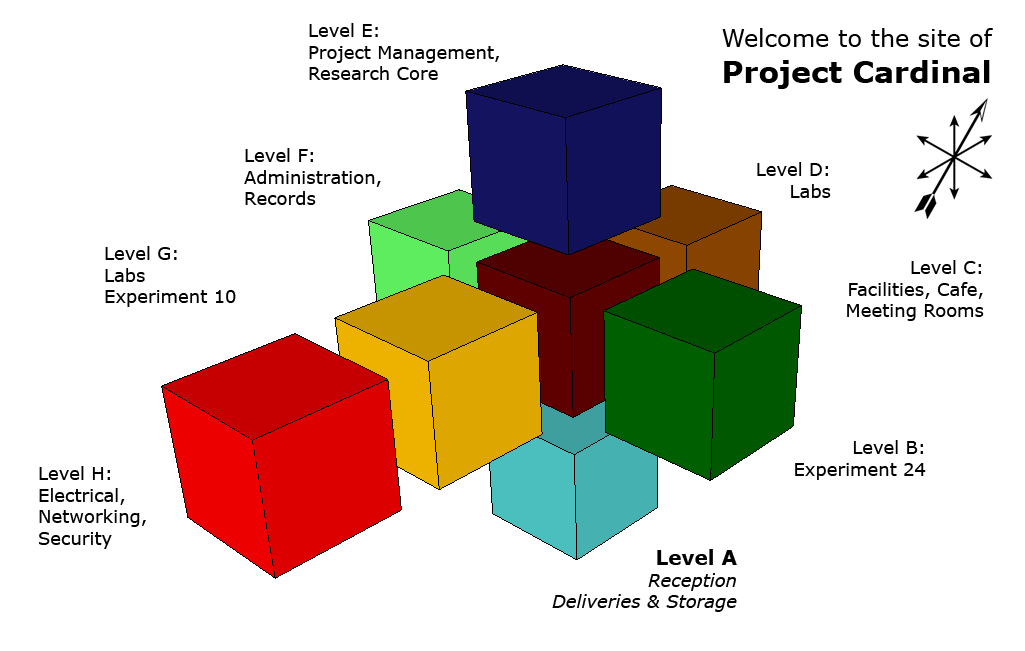
<style>
.page{position:relative;width:1025px;height:651px;background:#ffffff}
.page>*{position:absolute;margin:0}
.t1{font:18px "Verdana";color:#000000}
.t2{font:24px "Verdana";color:#000000}
.t3{font:30px "Verdana-Bold";color:#000000}
.t4{font:18px "Verdana-Italic";color:#000000}
.t5{font:20px "Verdana-Bold";color:#000000}
</style>
<div class="page">
<p class="t1" style="left:309px;top:23px;width:190px;height:57px">Level E:<br>Project Management,<br>Research Core</p>
<p class="t2" style="left:722px;top:28px;width:271px;height:61px;text-align:right">Welcome to the site of<br><span class="t3">Project Cardinal</span></p>
<p class="t1" style="left:244px;top:148px;width:137px;height:57px">Level F:<br>Administration,<br>Records</p>
<p class="t1" style="left:757px;top:162px;width:74px;height:36px;text-align:right">Level D:<br>Labs</p>
<p class="t1" style="left:105px;top:246px;width:131px;height:61px">Level G:<br>Labs<br>Experiment 10</p>
<p class="t1" style="left:847px;top:260px;width:137px;height:61px;text-align:right">Level C:<br>Facilities, Cafe,<br>Meeting Rooms</p>
<p class="t1" style="left:795px;top:440px;width:131px;height:40px;text-align:right">Level B:<br>Experiment 24</p>
<p class="t1" style="left:39px;top:466px;width:107px;height:83px">Level H:<br>Electrical,<br>Networking,<br>Security</p>
<p class="t4" style="left:552px;top:549px;width:185px;height:63px;text-align:right"><span class="t5">Level A<br></span>Reception<br>Deliveries &amp; Storage</p>
</div>
